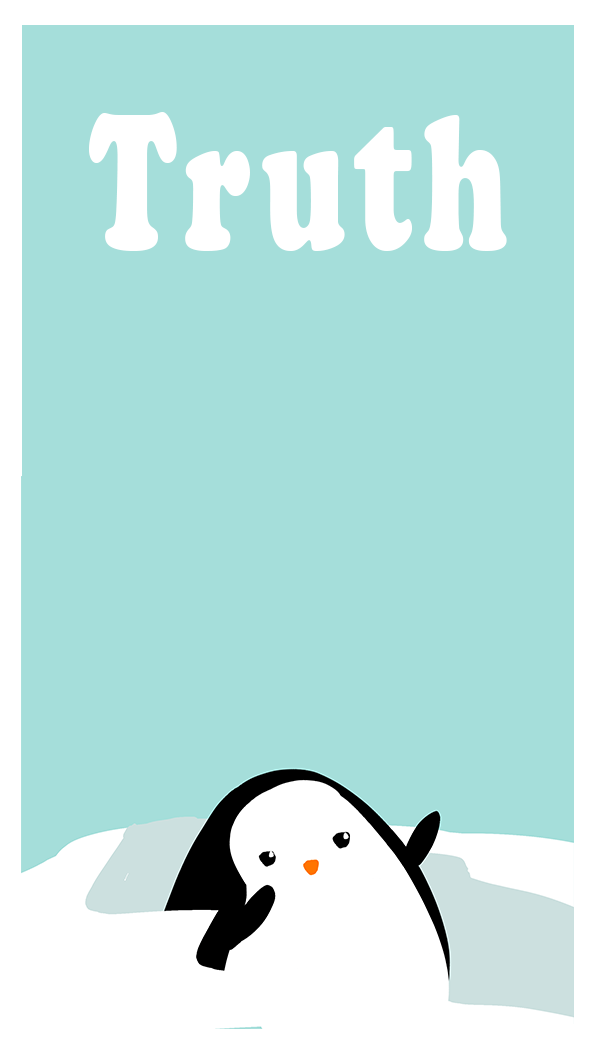
<style>
.page{position:relative;width:600px;height:1050px;background:#a5deda}
.page>*{position:absolute;margin:0}
.t1{font:200px "CooperBlack";letter-spacing:0.075em;color:#ffffff;scale:0.62 1}
</style>
<div class="page">
<p class="t1" style="left:89px;top:112px;width:418px;height:139px">Truth</p>
</div>
